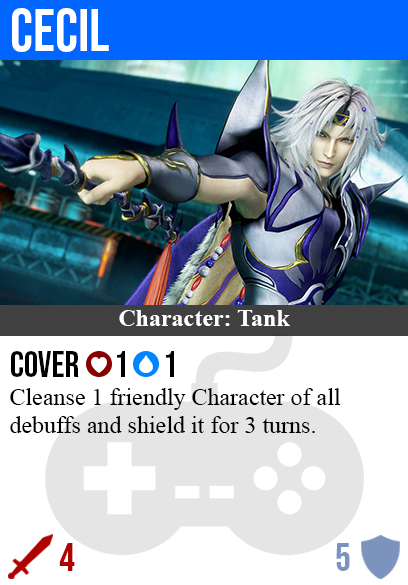
<style>
.page{position:relative;width:408px;height:585px;background:#ffffff}
.page>*{position:absolute;margin:0}
.t1{font:60px "BebasNeue-Regular";color:#ffffff}
.t2{font:24px "TimesNewRomanPS-BoldMT";color:#ffffff}
.t3{font:36px "BebasNeue-Regular";color:#000000}
.t4{font:24px "TimesNewRomanPSMT";color:#000000}
.t5{font:40px "BebasNeue-Regular";color:#af0202}
.t6{font:40px "BebasNeue-Regular";color:#7c94bd}
</style>
<div class="page">
<p class="t1" style="left:12px;top:8px;width:97px;height:44px">cecil</p>
<p class="t2" style="left:119px;top:310px;width:171px;height:16px">Character: Tank</p>
<p class="t3" style="left:11px;top:351px;width:163px;height:26px">cover      1      1</p>
<p class="t4" style="left:10px;top:388px;width:331px;height:45px">Cleanse 1 friendly Character of all<br>debuffs and shield it for 3 turns.</p>
<p class="t5" style="left:59px;top:543px;width:16px;height:28px">4</p>
<p class="t6" style="left:336px;top:543px;width:14px;height:28px">5</p>
</div>
